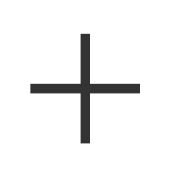
<style>
.page{position:relative;width:169px;height:169px;background:#ffffff}
.page>*{position:absolute;margin:0}
.t1{font:150px "KozGoPr6N-Regular";color:#333333;text-transform:uppercase}
</style>
<div class="page">
<p class="t1" style="left:30px;top:33px;width:110px;height:111px">＋</p>
</div>
